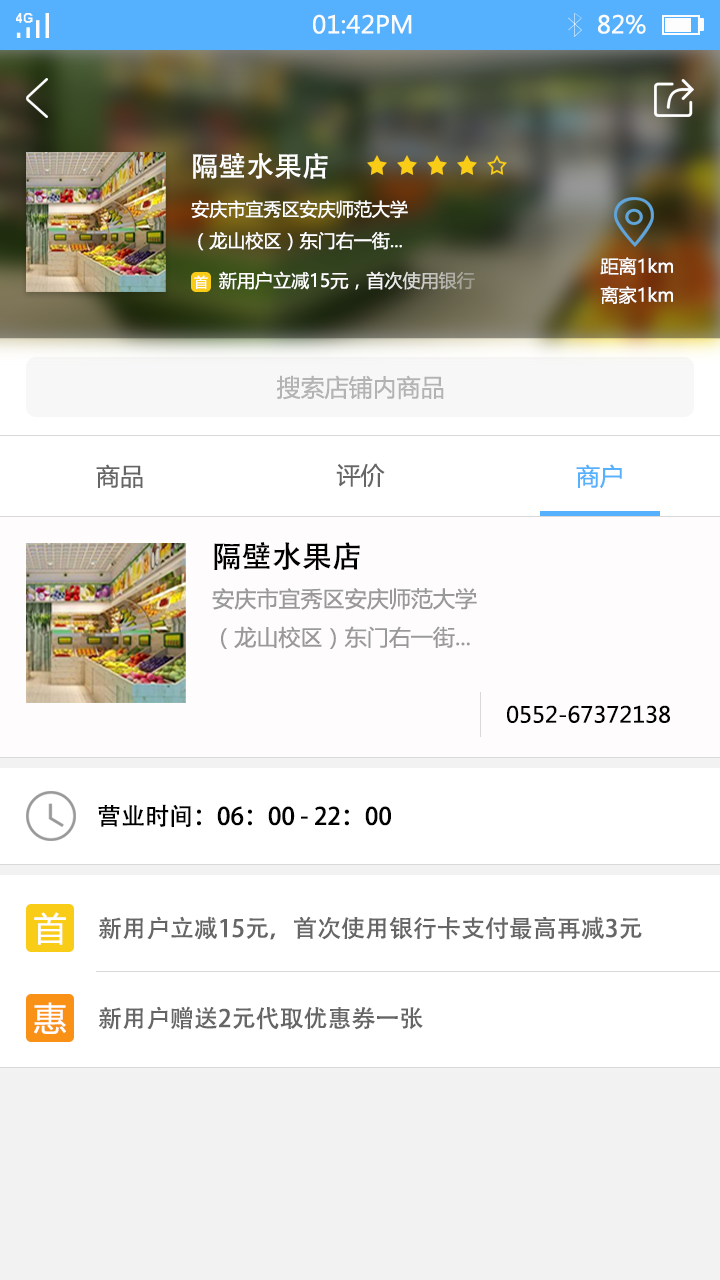
<style>
.page{position:relative;width:720px;height:1280px;background:#ffffff}
.page>*{position:absolute;margin:0}
.t1{font:24px "MicrosoftYaHei";color:#fbfdfc}
.t2{font:27.7px "AdobeHeitiStd-Regular";color:#ffffff}
.t3{font:18px "MicrosoftYaHei";color:#ffffff}
.t4{font:18.1px "MicrosoftYaHei";color:#ffffff}
.t5{font:13.8px "MicrosoftYaHei";color:#ffffff}
.t6{font:24px "MicrosoftYaHei";color:#b3b3b3}
.t7{font:24px "MicrosoftYaHei";color:#666666}
.t8{font:24px "MicrosoftYaHei";color:#55b0fe}
.t9{font:30px "AdobeHeitiStd-Regular";color:#000000}
.t10{font:22px "MicrosoftYaHei";color:#999999}
.t11{font:22px "MicrosoftYaHei";color:#000000}
.t12{font:24px "AdobeHeitiStd-Regular";color:#000000}
.t13{font:33.2px "MicrosoftYaHei";color:#ffffff}
.t14{font:24px "AdobeHeitiStd-Regular";color:#666666}
</style>
<div class="page">
<p class="t1" style="left:313px;top:14px;width:99px;height:20px">01:42PM</p>
<p class="t1" style="left:598px;top:14px;width:48px;height:20px">82%</p>
<p class="t2" style="left:193px;top:153px;width:135px;height:26px">隔壁水果店</p>
<p class="t3" style="left:191px;top:200px;width:217px;height:51px">安庆市宜秀区安庆师范大学<br>（龙山校区）东门右一街...</p>
<p class="t4" style="left:600px;top:257px;width:73px;height:18px">距离1km</p>
<p class="t5" style="left:194px;top:275px;width:14px;height:14px">首</p>
<p class="t3" style="left:219px;top:271px;width:256px;height:19px">新用户立减15元，首次使用银行</p>
<p class="t4" style="left:600px;top:286px;width:73px;height:18px">离家1km</p>
<p class="t6" style="left:277px;top:375px;width:167px;height:25px">搜索店铺内商品</p>
<p class="t7" style="left:96px;top:464px;width:47px;height:24px">商品</p>
<p class="t7" style="left:336px;top:463px;width:49px;height:25px">评价</p>
<p class="t8" style="left:576px;top:464px;width:46px;height:25px">商户</p>
<p class="t9" style="left:214px;top:542px;width:146px;height:28px">隔壁水果店</p>
<p class="t10" style="left:212px;top:588px;width:265px;height:61px">安庆市宜秀区安庆师范大学<br>（龙山校区）东门右一街...</p>
<p class="t11" style="left:507px;top:705px;width:163px;height:18px">0552-67372138</p>
<p class="t12" style="left:98px;top:804px;width:293px;height:24px">营业时间：06：00 - 22：00</p>
<p class="t13" style="left:34px;top:912px;width:32px;height:33px">首</p>
<p class="t14" style="left:98px;top:916px;width:544px;height:24px">新用户立减15元，首次使用银行卡支付最高再减3元</p>
<p class="t13" style="left:34px;top:1002px;width:32px;height:32px">惠</p>
<p class="t14" style="left:98px;top:1006px;width:325px;height:24px">新用户赠送2元代取优惠券一张</p>
</div>
